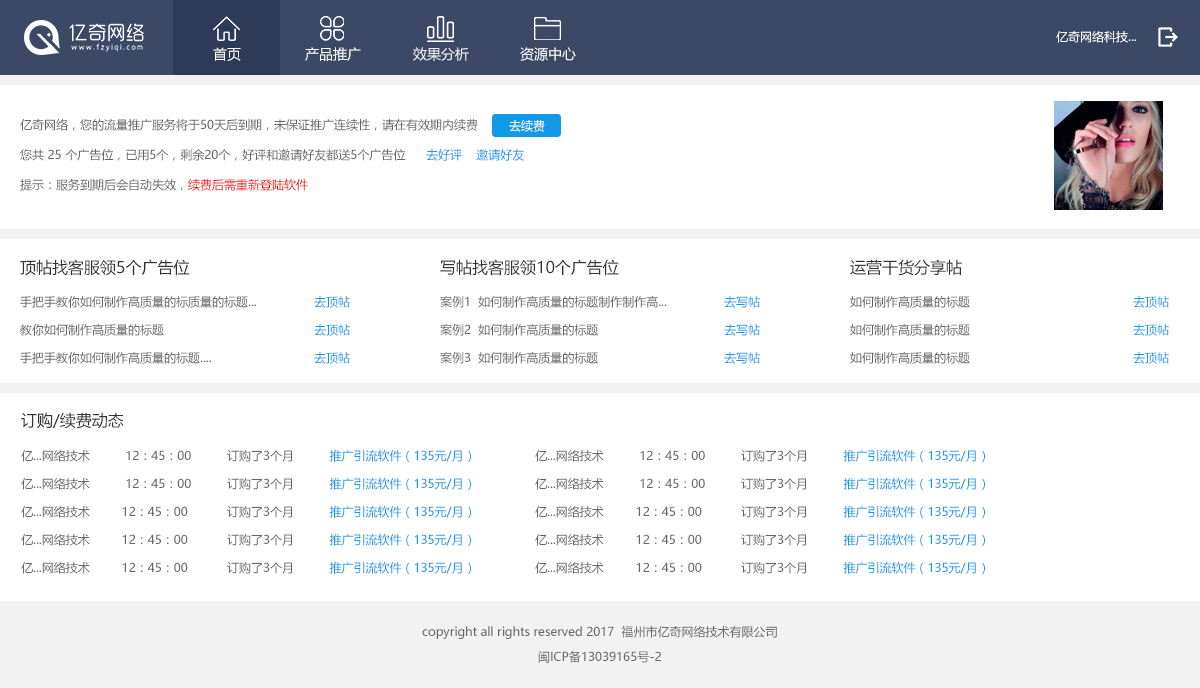
<style>
.page{position:relative;width:1200px;height:688px;background:#ffffff}
.page>*{position:absolute;margin:0}
.t1{font:12px "MicrosoftYaHei";color:#ffffff}
.t2{font:14px "MicrosoftYaHei";color:#ffffff}
.t3{font:14px "MicrosoftYaHei";color:#f2f2f2}
.t4{font:12px/30px "MicrosoftYaHei";color:#666666}
.t5{font:12px/30px "MicrosoftYaHei";color:#f30000}
.t6{font:12px "MicrosoftYaHei";color:#1299e7}
.t7{font:16px "MicrosoftYaHei";color:#333333}
.t8{font:12px/28px "MicrosoftYaHei";color:#666666}
.t9{font:12px/28px "MicrosoftYaHei";color:#1299e7}
.t10{font:12px "MicrosoftYaHei";color:#666666}
</style>
<div class="page">
<p class="t1" style="left:1056px;top:31px;width:80px;height:12px">亿奇网络科技...</p>
<p class="t2" style="left:213px;top:47px;width:28px;height:14px">首页</p>
<p class="t2" style="left:305px;top:47px;width:56px;height:14px">产品推广</p>
<p class="t3" style="left:413px;top:47px;width:56px;height:14px">效果分析</p>
<p class="t2" style="left:520px;top:47px;width:56px;height:14px">资源中心</p>
<p class="t4" style="left:20px;top:118px;width:458px;height:73px;text-align:justify">亿奇网络，您的流量推广服务将于50天后到期，未保证推广连续性，请在有效期内续费<br>您共 25 个广告位，已用5个，剩余20个，好评和邀请好友都送5个广告位<br>提示：服务到期后会自动失效，<span class="t5">续费后需重新登陆软件</span></p>
<p class="t1" style="left:509px;top:120px;width:36px;height:12px">去续费</p>
<p class="t6" style="left:426px;top:149px;width:98px;height:12px">去好评    邀请好友</p>
<p class="t7" style="left:20px;top:259px;width:170px;height:17px">顶帖找客服领5个广告位</p>
<p class="t7" style="left:440px;top:259px;width:179px;height:17px">写帖找客服领10个广告位</p>
<p class="t7" style="left:850px;top:259px;width:112px;height:17px">运营干货分享帖</p>
<p class="t8" style="left:20px;top:295px;width:236px;height:69px;text-align:justify">手把手教你如何制作高质量的标质量的标题...<br>教你如何制作高质量的标题<br>手把手教你如何制作高质量的标题....</p>
<p class="t9" style="left:314px;top:296px;width:36px;height:68px;text-align:justify">去顶帖<br>去顶帖<br>去顶帖</p>
<p class="t8" style="left:440px;top:295px;width:227px;height:69px;text-align:justify">案例1  如何制作高质量的标题制作制作高...<br>案例2  如何制作高质量的标题<br>案例3  如何制作高质量的标题</p>
<p class="t9" style="left:724px;top:296px;width:36px;height:68px;text-align:justify">去写帖<br>去写帖<br>去写帖</p>
<p class="t8" style="left:850px;top:295px;width:120px;height:69px;text-align:justify">如何制作高质量的标题<br>如何制作高质量的标题<br>如何制作高质量的标题</p>
<p class="t9" style="left:1133px;top:296px;width:36px;height:68px;text-align:justify">去顶帖<br>去顶帖<br>去顶帖</p>
<p class="t7" style="left:21px;top:412px;width:103px;height:17px">订购/续费动态</p>
<p class="t8" style="left:21px;top:449px;width:450px;height:125px;text-align:justify">亿...网络技术          12：45：00          订购了3个月          <span class="t9">推广引流软件（135元/月）<br></span>亿...网络技术          12：45：00          订购了3个月          <span class="t9">推广引流软件（135元/月）<br></span>亿...网络技术         12：45：00           订购了3个月          <span class="t9">推广引流软件（135元/月）<br></span>亿...网络技术         12：45：00           订购了3个月          <span class="t9">推广引流软件（135元/月）<br></span>亿...网络技术         12：45：00           订购了3个月          <span class="t9">推广引流软件（135元/月）</span></p>
<p class="t8" style="left:535px;top:449px;width:450px;height:125px;text-align:justify">亿...网络技术          12：45：00          订购了3个月          <span class="t9">推广引流软件（135元/月）<br></span>亿...网络技术          12：45：00          订购了3个月          <span class="t9">推广引流软件（135元/月）<br></span>亿...网络技术         12：45：00           订购了3个月          <span class="t9">推广引流软件（135元/月）<br></span>亿...网络技术         12：45：00           订购了3个月          <span class="t9">推广引流软件（135元/月）<br></span>亿...网络技术         12：45：00           订购了3个月          <span class="t9">推广引流软件（135元/月）</span></p>
<p class="t10" style="left:422px;top:625px;width:355px;height:14px">copyright all rights reserved 2017  福州市亿奇网络技术有限公司</p>
<p class="t10" style="left:538px;top:650px;width:123px;height:13px">闽ICP备13039165号-2</p>
</div>
